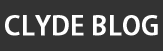
<style>
.page{position:relative;width:163px;height:51px;background:#333333}
.page>*{position:absolute;margin:0}
.t1{font:26px "AdobeHeitiStd-Regular";color:#ffffff;font-weight:bold}
</style>
<div class="page">
<p class="t1" style="left:5px;top:15px;width:153px;height:21px">CLYDE BLOG</p>
</div>
